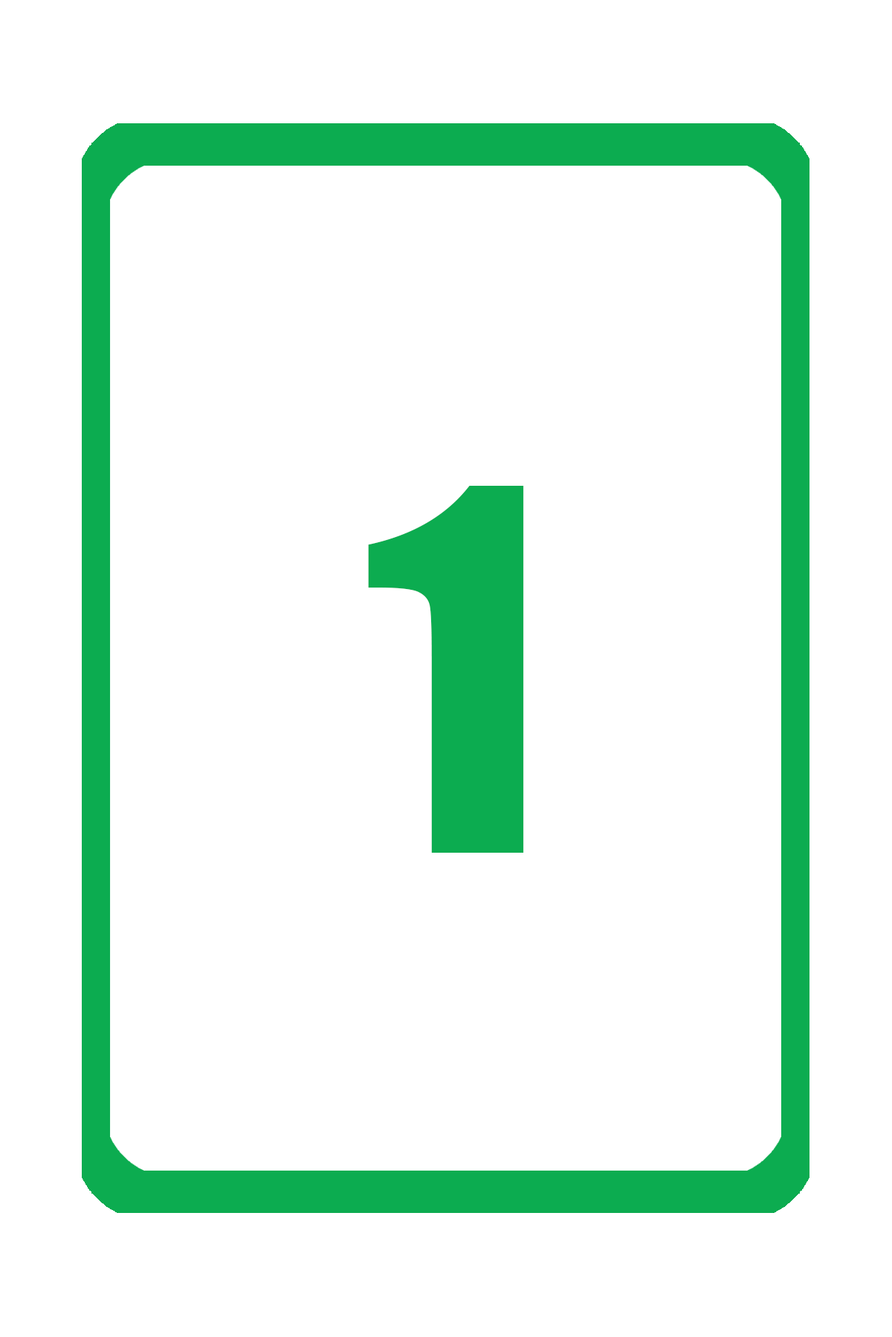
<style>
.page{position:relative;width:892px;height:1337px;background:#ffffff}
.page>*{position:absolute;margin:0}
.t1{font:464.4px "Impact";color:#0cac50}
</style>
<div class="page">
<p class="t1" style="left:368px;top:486px;width:156px;height:367px">1</p>
</div>
